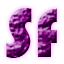
<style>
.page{position:relative;width:64px;height:64px;background:#ffffff}
.page>*{position:absolute;margin:0}
.t1{font:72px "Bauhaus93"}
</style>
<div class="page">
<p class="t1" style="left:6px;top:8px;width:51px;height:50px">Sf</p>
</div>
